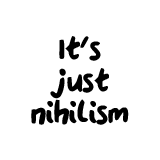
<style>
.page{position:relative;width:160px;height:160px;background:#ffffff}
.page>*{position:absolute;margin:0}
.t1{font:35.9px/31.9px "QAReports";color:#000000}
</style>
<div class="page">
<p class="t1" style="left:31px;top:36px;width:98px;height:89px;text-align:center">It's<br>just<br>nihilism</p>
</div>
